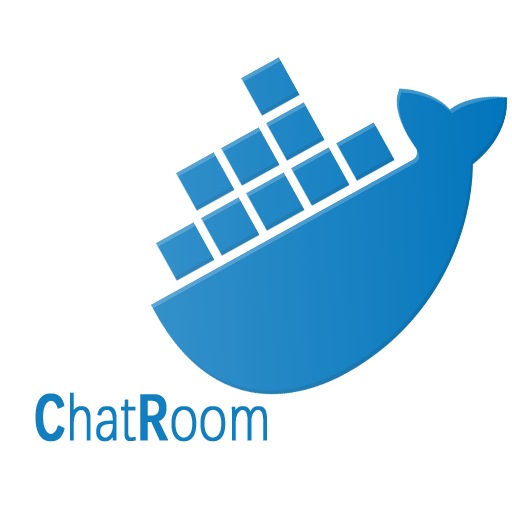
<style>
.page{position:relative;width:512px;height:512px;background:#ffffff}
.page>*{position:absolute;margin:0}
.t1{font:66px "DengXian-Light";color:#117ec0;font-weight:bold;scale:0.76 1}
.t2{font:66px "DengXian-Bold";color:#117ec0;font-weight:bold;scale:0.76 1}
</style>
<div class="page">
<p class="t1" style="left:35px;top:392px;width:232px;height:50px"><span class="t2">C</span>hat<span class="t2">R</span>oom</p>
</div>
